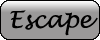
<style>
.page{position:relative;width:100px;height:40px;background:#9a9999}
.page>*{position:absolute;margin:0}
.t1{font:23px "LucidaHandwriting-Italic";color:#000000}
</style>
<div class="page">
<p class="t1" style="left:10px;top:10px;width:88px;height:26px">Escape</p>
</div>
